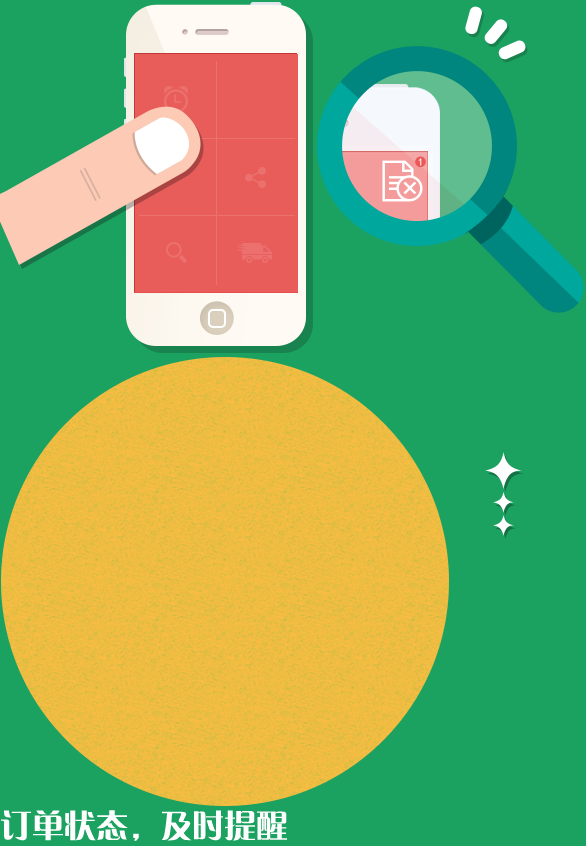
<style>
.page{position:relative;width:586px;height:846px;background:#1ba160}
.page>*{position:absolute;margin:0}
.t1{font:32px "FZCQJW--GB1-0";color:#ffffff}
</style>
<div class="page">
<p class="t1" style="left:1px;top:810px;width:286px;height:31px">订单状态，及时提醒</p>
</div>
